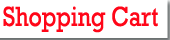
<style>
.page{position:relative;width:170px;height:40px;background:#ffffff}
.page>*{position:absolute;margin:0}
.t1{font:28.2px "Rockwell";color:#ff0618;scale:0.82 1}
</style>
<div class="page">
<p class="t1" style="left:3px;top:6px;width:155px;height:27px">Shopping Cart</p>
</div>
